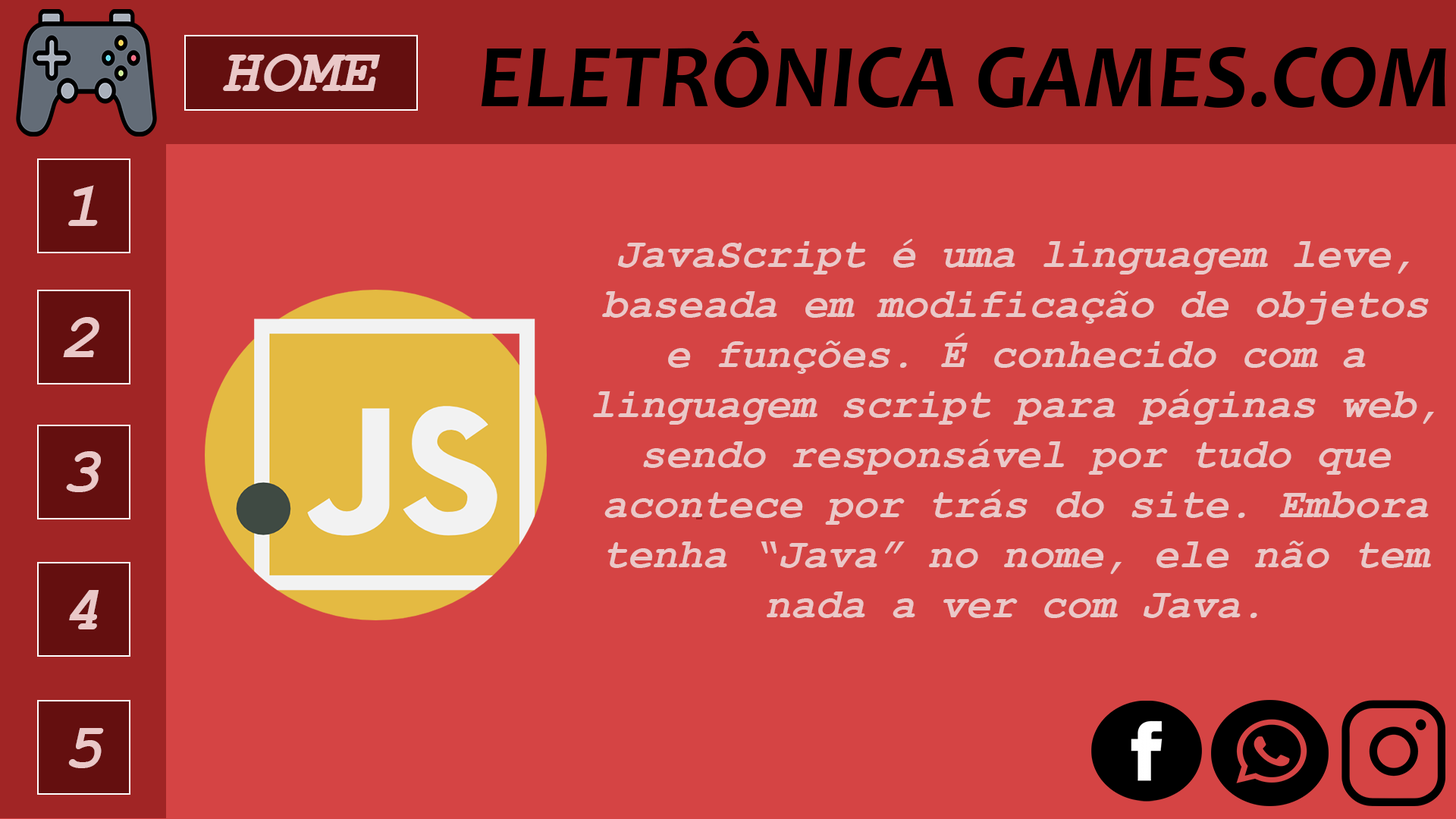
<style>
.page{position:relative;width:1456px;height:819px;background:#d54444}
.page>*{position:absolute;margin:0}
.t1{font:91px "Candara-BoldItalic";color:#000000}
.t2{font:64.5px "CourierNewPS-BoldItalicMT";color:#eac8c8}
.t3{font:41.7px "CourierNewPS-BoldItalicMT";color:#eac8c8}
</style>
<div class="page">
<p class="t1" style="left:481px;top:31px;width:965px;height:77px">ELETRÔNICA GAMES.COM</p>
<p class="t2" style="left:223px;top:54px;width:157px;height:38px">HOME</p>
<p class="t2" style="left:68px;top:185px;width:30px;height:41px">1</p>
<p class="t3" style="left:593px;top:239px;width:841px;height:379px;text-align:center">JavaScript é uma linguagem leve,<br>baseada em modificação de objetos<br>e funções. É conhecido com a<br>linguagem script para páginas web,<br>sendo responsável por tudo que<br>acontece por trás do site. Embora<br>tenha “Java” no nome, ele não tem<br>nada a ver com Java.</p>
<p class="t2" style="left:63px;top:317px;width:36px;height:40px">2</p>
<p class="t2" style="left:66px;top:451px;width:35px;height:41px">3</p>
<p class="t2" style="left:69px;top:590px;width:30px;height:39px">4</p>
<p class="t2" style="left:68px;top:728px;width:36px;height:40px">5</p>
</div>
